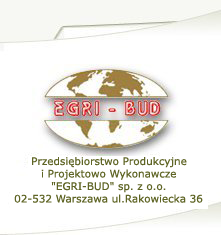
<style>
.page{position:relative;width:221px;height:235px;background:#ffffff}
.page>*{position:absolute;margin:0}
.t1{font:10.4px "Verdana";color:#5f6525}
</style>
<div class="page">
<p class="t1" style="left:14px;top:157px;width:189px;height:46px;text-align:center">Przedsiębiorstwo Produkcyjne<br> i Projektowo Wykonawcze <br>"EGRI-BUD" sp. z o.o.<br>02-532 Warszawa ul.Rakowiecka 36</p>
</div>
